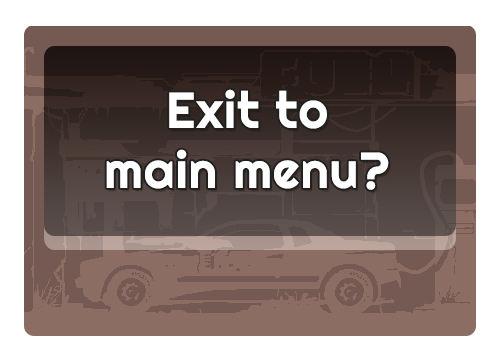
<style>
.page{position:relative;width:499px;height:357px;background:#ffffff}
.page>*{position:absolute;margin:0}
.t1{font:50.6px/60px "Righteous-Regular";letter-spacing:0.02em;color:#ffffff}
</style>
<div class="page">
<p class="t1" style="left:106px;top:89px;width:283px;height:101px;text-align:center">Exit to<br>main menu?</p>
</div>
